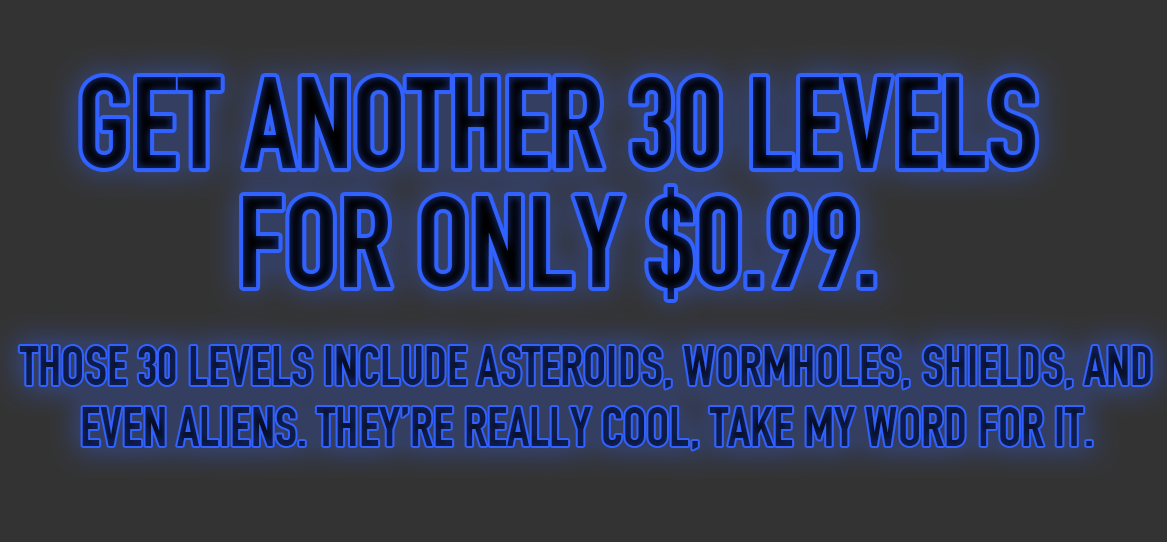
<style>
.page{position:relative;width:1167px;height:542px;background:#333333}
.page>*{position:absolute;margin:0}
.t1{font:127.5px/118.8px "DINEngschrift";color:#060d21;text-transform:uppercase}
.t2{font:54.5px/60.5px "DINEngschrift";color:#0e1c4a;text-transform:uppercase}
</style>
<div class="page">
<p class="t1" style="left:82px;top:77px;width:954px;height:222px;text-align:center">Get another 30 levels for only $0.99.</p>
<p class="t2" style="left:19px;top:346px;width:1132px;height:104px;text-align:center">those 30 levels include asteroids, wormholes, shields, and even aliens. They’re really cool, take my word for it.</p>
</div>
